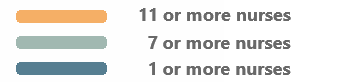
<style>
.page{position:relative;width:350px;height:82px;background:#fefefe}
.page>*{position:absolute;margin:0}
.t1{font:18px "SegoeUI-Bold";color:#696969}
</style>
<div class="page">
<p class="t1" style="left:139px;top:8px;width:152px;height:13px">11 or more nurses</p>
<p class="t1" style="left:148px;top:36px;width:143px;height:13px">7 or more nurses</p>
<p class="t1" style="left:149px;top:62px;width:142px;height:13px">1 or more nurses</p>
</div>
